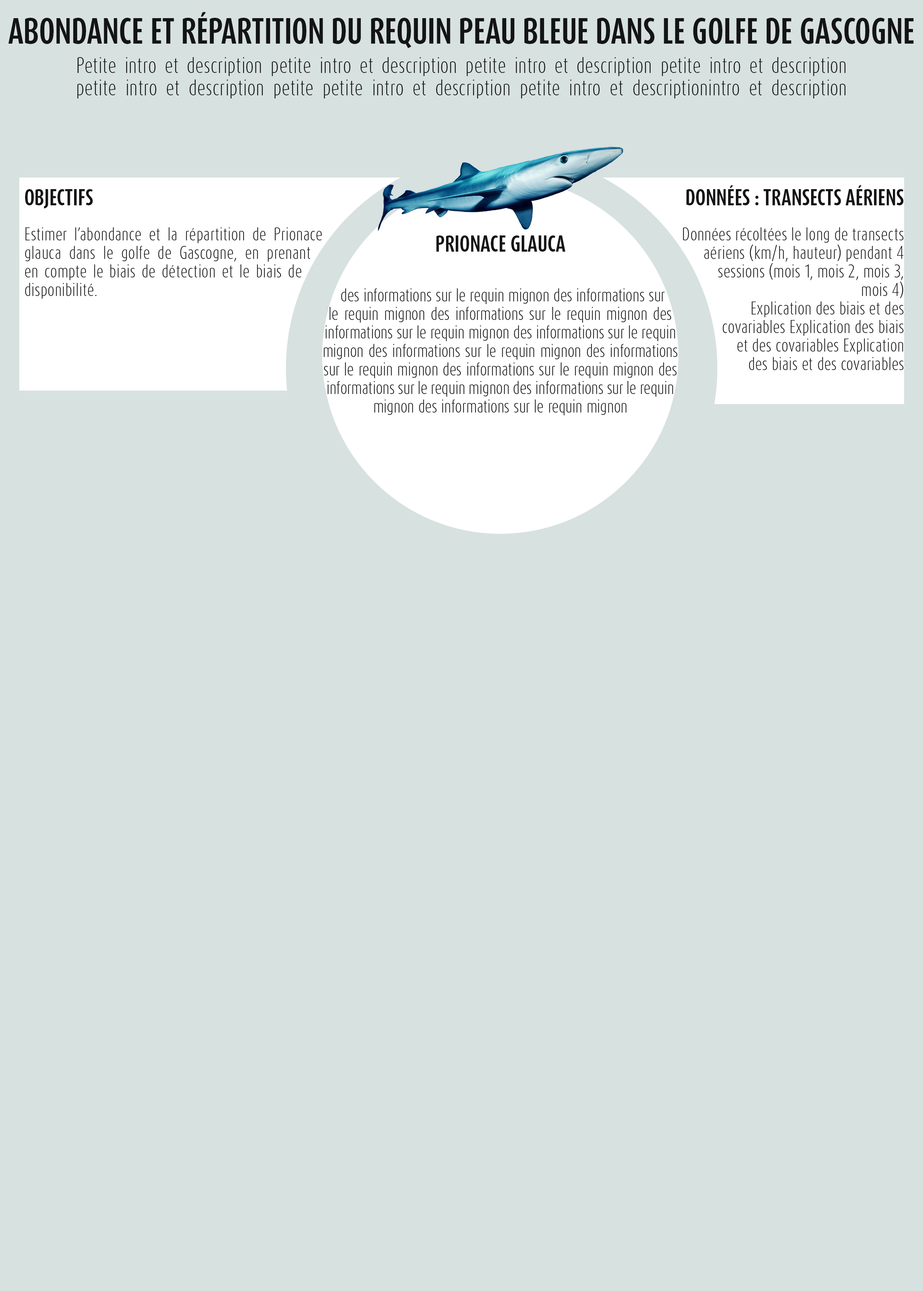
<style>
.page{position:relative;width:923px;height:1291px;background:#d7e1e0}
.page>*{position:absolute;margin:0}
.t1{font:30.1px "DaxCompactPro-Bold";color:#141414;text-transform:uppercase}
.t2{font:18.5px "DaxCompactPro-Light";color:#141414}
.t3{font:15.4px "DaxCompactPro-Light";color:#141414}
.t4{font:5.4px "DaxCompactPro";color:#141414;text-transform:uppercase}
.t5{font:19.3px "DaxCompactPro-Bold";color:#141414;text-transform:uppercase}
</style>
<div class="page">
<p class="t1" style="left:8px;top:12px;width:906px;height:36px">Abondance et répartition du requin peau bleue dans le Golfe de Gascogne</p>
<p class="t2" style="left:77px;top:57px;width:769px;height:41px;text-align:justify">Petite intro et description petite intro et description petite intro et description petite intro et description petite intro et description petite petite intro et description petite intro et descriptionintro et description</p>
<p class="t3" style="left:683px;top:185px;width:221px;height:185px;text-align:right"><span class="t4"><br></span><span class="t5"> Données : transects aériens<br> </span><br>Données récoltées le long de transects aériens (km/h, hauteur) pendant 4 sessions (mois 1, mois 2, mois 3, mois 4)<br>Explication des biais et des covariables Explication des biais et des covariables Explication des biais et des covariables</p>
<p class="t3" style="left:25px;top:189px;width:297px;height:110px;text-align:justify"><span class="t4"><br></span><span class="t5">Objectifs<br> </span><br>Estimer l’abondance et la répartition de Prionace glauca dans le golfe de Gascogne, en prenant en compte le biais de détection et le biais de disponibilité.</p>
<p class="t3" style="left:324px;top:235px;width:354px;height:180px;text-align:justify"><span class="t4"><br></span><span class="t5"><br><br>Prionace glauca<br><br> </span>des informations sur le requin mignon des informations sur le requin mignon des informations sur le requin mignon des informations sur le requin mignon des informations sur le requin mignon des informations sur le requin mignon des informations sur le requin mignon des informations sur le requin mignon des informations sur le requin mignon des informations sur le requin mignon des informations sur le requin mignon</p>
</div>
